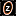
<style>
.page{position:relative;width:16px;height:16px;background:#000000}
.page>*{position:absolute;margin:0}
.t1{font:8px "ArialMT";color:#ffffff}
</style>
<div class="page">
<p class="t1" style="left:5px;top:6px;width:5px;height:5px">z</p>
</div>
